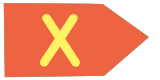
<style>
.page{position:relative;width:160px;height:80px;background:#ee6442}
.page>*{position:absolute;margin:0}
.t1{font:65.5px "FZY4K--GBK1-0";color:#fff364}
</style>
<div class="page">
<p class="t1" style="left:40px;top:14px;width:40px;height:53px">X</p>
</div>
